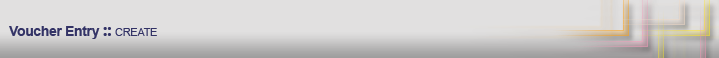
<style>
.page{position:relative;width:719px;height:58px;background:#e1e0e0}
.page>*{position:absolute;margin:0}
.t1{font:14px "Arial-BoldMT";letter-spacing:-0.025em;color:#333366}
.t2{font:18px "SegoeUI-Bold";letter-spacing:-0.025em;color:#333366}
.t3{font:11px "ArialMT";letter-spacing:-0.025em;color:#070707}
</style>
<div class="page">
<p class="t1" style="left:9px;top:26px;width:148px;height:13px">Voucher Entry <span class="t2">:: </span><span class="t3">CREATE</span></p>
</div>
